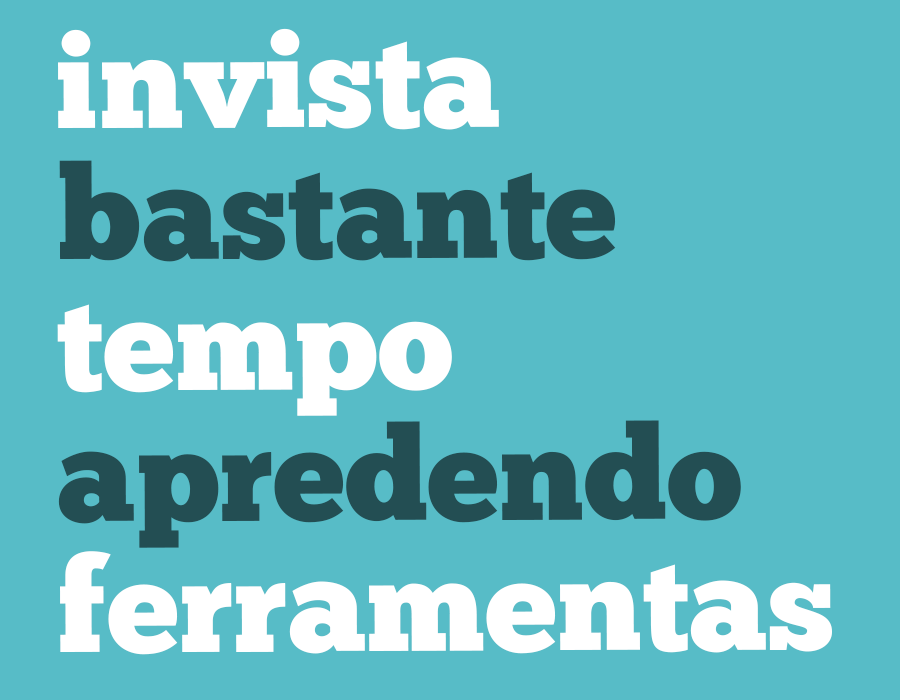
<style>
.page{position:relative;width:900px;height:700px;background:#57bcc7}
.page>*{position:absolute;margin:0}
.t1{font:131px/131px "ChunkFive-Roman";color:#ffffff}
.t2{font:131px/131px "ChunkFive-Roman";color:#234e53}
</style>
<div class="page">
<p class="t1" style="left:57px;top:28px;width:775px;height:627px">invista<br><span class="t2">bastante<br></span>tempo<br><span class="t2">apredendo<br></span>ferramentas</p>
</div>
